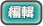
<style>
.page{position:relative;width:43px;height:26px}
.page>*{position:absolute;margin:0}
.t1{font:13px "GothicMB101Pr6N-Medium";color:#fff6f2}
</style>
<div class="page">
<p class="t1" style="left:8px;top:5px;width:26px;height:14px">編輯</p>
</div>
